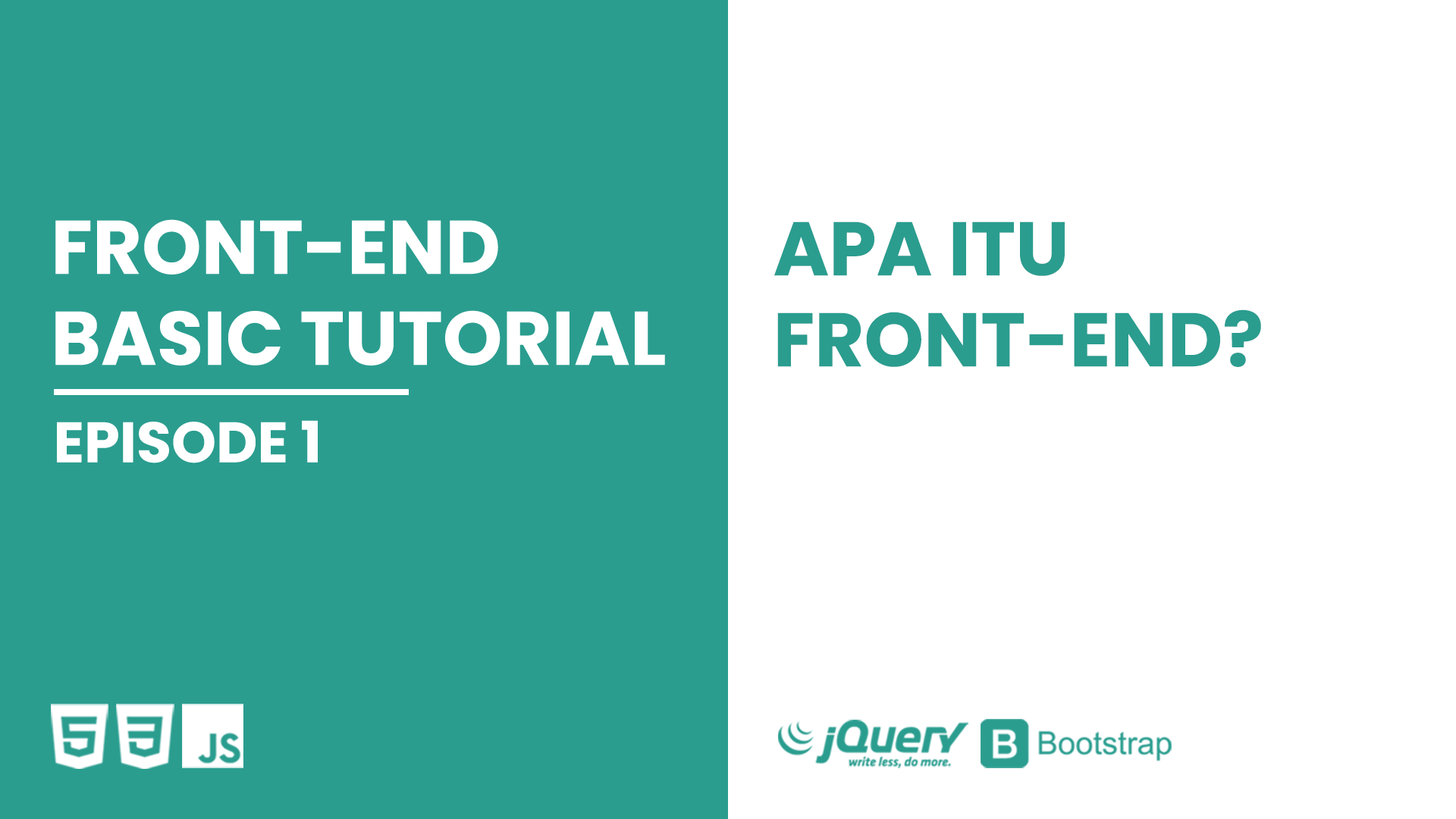
<style>
.page{position:relative;width:1456px;height:819px;background:#ffffff}
.page>*{position:absolute;margin:0}
.t1{font:75.8px "Poppins-Bold";color:#ffffff}
.t2{font:75.8px "Poppins-Bold";color:#2a9d8f}
.t3{font:56.9px "Poppins-Bold";color:#ffffff}
</style>
<div class="page">
<p class="t1" style="left:55px;top:219px;width:610px;height:147px">FRONT-END <br>BASIC TUTORIAL</p>
<p class="t2" style="left:774px;top:221px;width:487px;height:146px">APA ITU<br>FRONT-END?</p>
<p class="t3" style="left:57px;top:420px;width:261px;height:43px">EPISODE 1</p>
</div>
